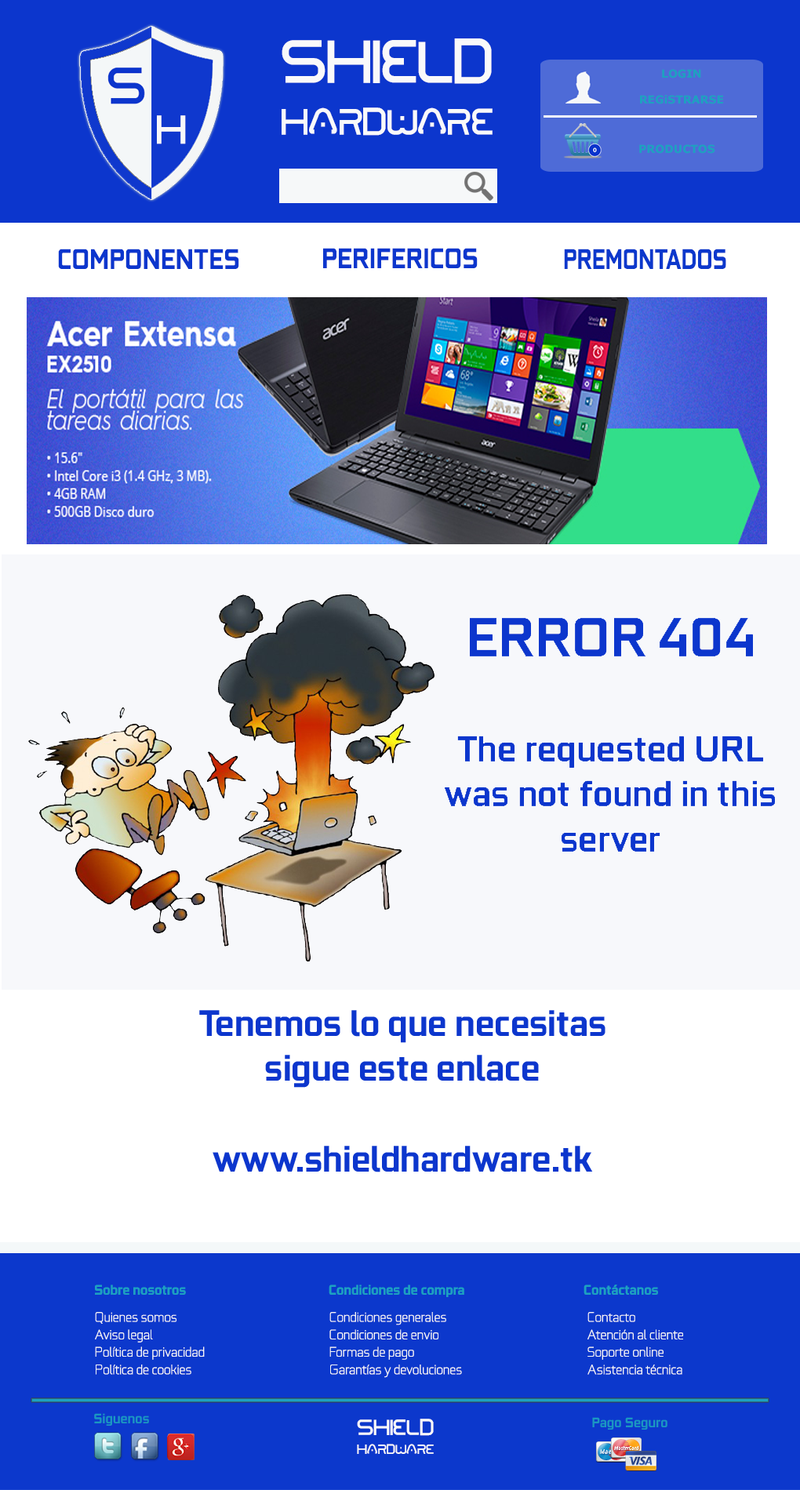
<style>
.page{position:relative;width:800px;height:1490px;background:#ffffff}
.page>*{position:absolute;margin:0}
.t1{font:43.2px "01Digitall";color:#f9f9fa}
.t2{font:20.1px "01Digitall";color:#f9f9fa}
.t3{font:71.1px "01Digitall";color:#f9f9fa}
.t4{font:11px "Verdana-Bold";color:#1da1c0}
.t5{font:28.7px "GeForce-Bold";color:#0c36cd;scale:0.9 1}
.t6{font:28.7px "GeForce-Bold";color:#0c36cd;scale:0.91 1}
.t7{font:28.7px "GeForce-Bold";color:#0c38cc;scale:0.8 1}
.t8{font:14.1px "GeForce-Bold";color:#1da1c0}
.t9{font:14.1px "GeForce-Light";color:#f6f8f8}
.t10{font:14.1px "GeForce-Bold";color:#1b97c1}
.t11{font:15.7px "01Digitall";color:#f9f9fa}
.t12{font:25.8px "01Digitall";color:#f9f9fa}
</style>
<div class="page">
<p class="t1" style="left:282px;top:38px;width:211px;height:98px;text-align:center"><span class="t2"><br></span><span class="t3">SHIELD<br></span>HARDWARE</p>
<p class="t4" style="left:640px;top:69px;width:83px;height:35px;text-align:center">LOGIN<br><br>REGiSTRARSE</p>
<p class="t4" style="left:639px;top:144px;width:76px;height:10px">PRODUCTOS</p>
<p class="t5" style="left:58px;top:249px;width:181px;height:20px">COMPONENTES</p>
<p class="t6" style="left:323px;top:248px;width:155px;height:20px">PERIFERICOS</p>
<p class="t7" style="left:564px;top:249px;width:162px;height:20px">PREMONTADOS</p>
<p class="t8" style="left:95px;top:1285px;width:91px;height:10px">Sobre nosotros</p>
<p class="t8" style="left:329px;top:1285px;width:135px;height:12px">Condiciones de compra</p>
<p class="t8" style="left:584px;top:1285px;width:74px;height:10px">Contáctanos</p>
<p class="t9" style="left:95px;top:1312px;width:81px;height:12px">Quienes somos</p>
<p class="t9" style="left:329px;top:1312px;width:117px;height:14px">Condiciones generales</p>
<p class="t9" style="left:588px;top:1312px;width:47px;height:11px">Contacto</p>
<p class="t9" style="left:95px;top:1330px;width:58px;height:13px">Aviso legal</p>
<p class="t9" style="left:329px;top:1330px;width:109px;height:10px">Condiciones de envio</p>
<p class="t9" style="left:588px;top:1330px;width:95px;height:10px">Atención al cliente</p>
<p class="t9" style="left:95px;top:1347px;width:110px;height:13px">Política de privacidad</p>
<p class="t9" style="left:329px;top:1347px;width:85px;height:13px">Formas de pago</p>
<p class="t9" style="left:588px;top:1347px;width:76px;height:13px">Soporte online</p>
<p class="t9" style="left:96px;top:1365px;width:95px;height:10px">Política de cookies</p>
<p class="t9" style="left:330px;top:1365px;width:132px;height:13px">Garantías y devoluciones</p>
<p class="t9" style="left:588px;top:1365px;width:94px;height:10px">Asistencia técnica</p>
<p class="t10" style="left:94px;top:1413px;width:55px;height:13px">Siguenos</p>
<p class="t11" style="left:357px;top:1419px;width:77px;height:35px"><span class="t12">SHIELD<br></span>HARDWARE</p>
<p class="t10" style="left:592px;top:1417px;width:76px;height:13px">Pago Seguro</p>
</div>
